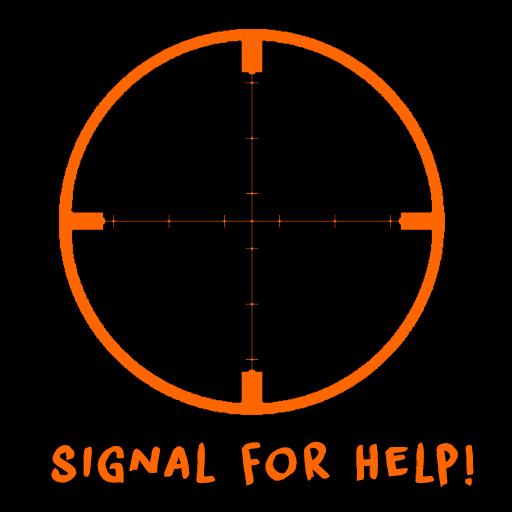
<style>
.page{position:relative;width:512px;height:512px;background:#000000}
.page>*{position:absolute;margin:0}
.t1{font:48px "DKLiquidEmbrace";letter-spacing:0.1em;color:#ff6600}
</style>
<div class="page">
<p class="t1" style="left:51px;top:441px;width:423px;height:46px">signal for help!</p>
</div>
